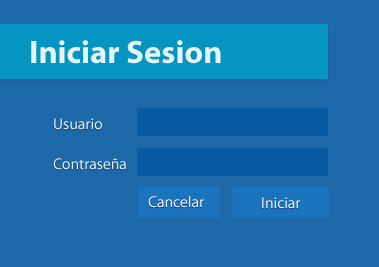
<style>
.page{position:relative;width:379px;height:267px;background:#1d68a8}
.page>*{position:absolute;margin:0}
.t1{font:32.6px "MyriadPro-Bold";color:#e7f6fb}
.t2{font:15.6px "MyriadPro-Regular";color:#e7f6fb}
.t3{font:15.6px "MyriadPro-Regular";color:#ffffff}
</style>
<div class="page">
<p class="t1" style="left:31px;top:40px;width:190px;height:24px">Iniciar Sesion</p>
<p class="t2" style="left:54px;top:118px;width:48px;height:12px">Usuario</p>
<p class="t2" style="left:53px;top:158px;width:73px;height:12px">Contraseña</p>
<p class="t3" style="left:148px;top:196px;width:56px;height:12px">Cancelar</p>
<p class="t3" style="left:262px;top:197px;width:38px;height:12px">Iniciar</p>
</div>
